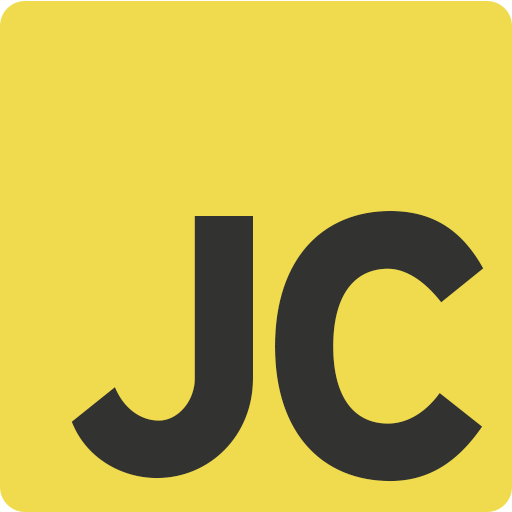
<style>
.page{position:relative;width:512px;height:512px;background:#f0db4f}
.page>*{position:absolute;margin:0}
.t1{font:375px "ExpresswayXb";color:#323330}
</style>
<div class="page">
<p class="t1" style="left:71px;top:211px;width:413px;height:271px">JC</p>
</div>
